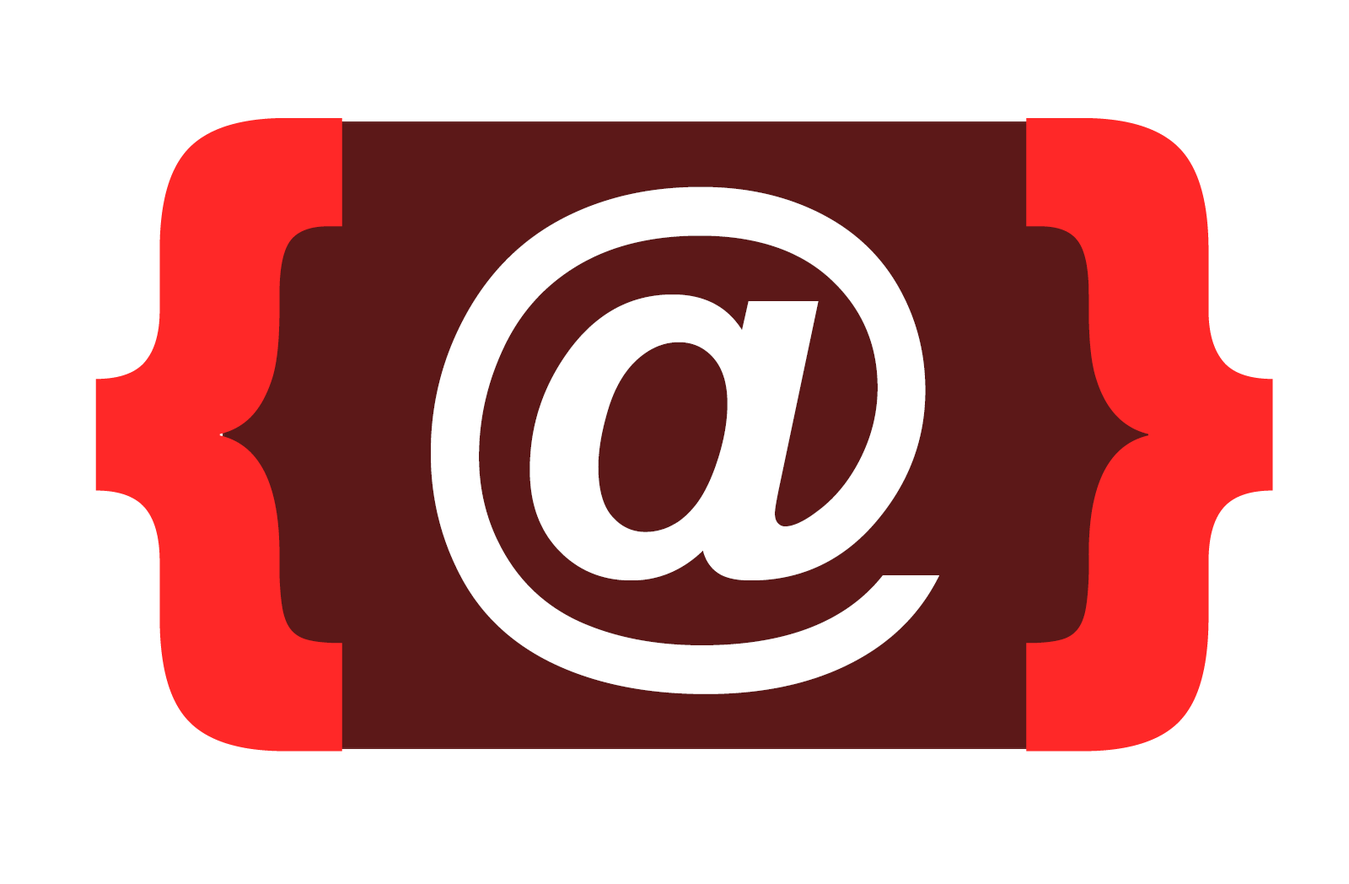
<style>
.page{position:relative;width:1349px;height:884px;background:#ffffff}
.page>*{position:absolute;margin:0}
.t1{font:674.6px "GillSans-UltraBold";color:#ff2828}
.t2{font:539.7px "Arial-BoldMT";color:#ffffff}
</style>
<div class="page">
<p class="t1" style="left:95px;top:118px;width:1178px;height:633px">{   }</p>
<p class="t2" style="left:431px;top:186px;width:508px;height:508px">@</p>
</div>
